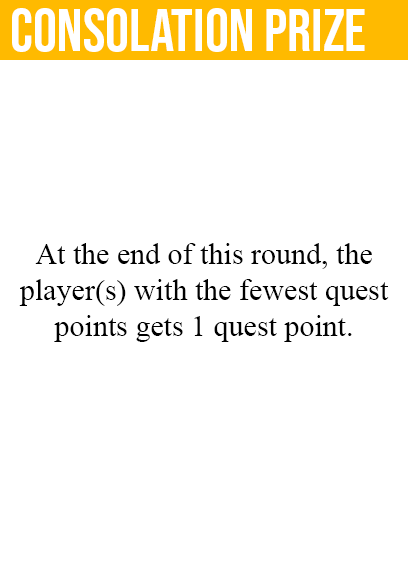
<style>
.page{position:relative;width:408px;height:585px;background:#ffffff}
.page>*{position:absolute;margin:0}
.t1{font:60px "BebasNeue-Regular";color:#ffffff}
.t2{font:30px "TimesNewRomanPSMT";color:#000000}
</style>
<div class="page">
<p class="t1" style="left:12px;top:8px;width:353px;height:44px">consolation prize</p>
<p class="t2" style="left:19px;top:243px;width:370px;height:99px;text-align:center">At the end of this round, the<br>player(s) with the fewest quest<br>points gets 1 quest point.</p>
</div>
